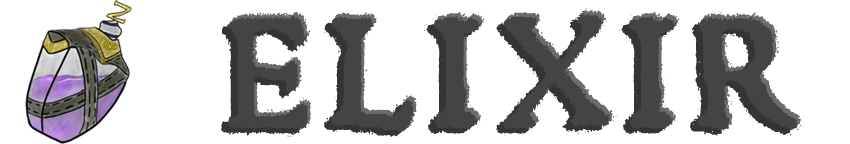
<style>
.page{position:relative;width:850px;height:144px;background:#ffffff}
.page>*{position:absolute;margin:0}
.t1{font:138px "1470JensonSemiBold";letter-spacing:0.14em;color:#343434}
.t2{font:138px "1470JensonSemiBold";letter-spacing:0.14em;color:#454343}
</style>
<div class="page">
<p class="t1" style="left:221px;top:17px;width:571px;height:120px">ELIXIR</p>
<p class="t2" style="left:228px;top:12px;width:571px;height:120px">ELIXIR</p>
<p class="t2" style="left:231px;top:8px;width:571px;height:120px">ELIXIR</p>
</div>
